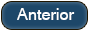
<style>
.page{position:relative;width:89px;height:31px;background:#1d4769}
.page>*{position:absolute;margin:0}
.t1{font:18px "Latha";color:#ffffff}
</style>
<div class="page">
<p class="t1" style="left:17px;top:8px;width:58px;height:12px">Anterior</p>
</div>
